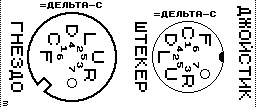
<style>
.page{position:relative;width:256px;height:107px;background:#ffffff}
.page>*{position:absolute;margin:0}
.t1{font:16px "ZX 6x8";color:#000000}
.t2{font:32px "zxSpectrumStrict";color:#000000}
</style>
<div class="page">
<p class="t1" style="left:237px;top:6px;width:16px;height:94px;rotate:90deg">ДЖОЙСТИК</p>
<p class="t1" style="left:9px;top:22px;width:14px;height:70px;rotate:90deg">ГНЕЗДО</p>
<p class="t2" style="left:66px;top:25px;width:12px;height:12px;rotate:90deg">D</p>
<p class="t1" style="left:135px;top:22px;width:12px;height:70px;rotate:90deg">ШТЕКЕР</p>
<p class="t2" style="left:182px;top:27px;width:12px;height:12px;rotate:90deg">C</p>
<p class="t2" style="left:48px;top:33px;width:12px;height:12px;rotate:90deg">C</p>
<p class="t2" style="left:84px;top:33px;width:12px;height:12px;rotate:90deg">L</p>
<p class="t2" style="left:165px;top:34px;width:12px;height:12px;rotate:90deg">D</p>
<p class="t2" style="left:199px;top:34px;width:12px;height:12px;rotate:90deg">F</p>
<p class="t2" style="left:40px;top:51px;width:12px;height:12px;rotate:90deg">F</p>
<p class="t2" style="left:92px;top:51px;width:12px;height:12px;rotate:90deg">U</p>
<p class="t2" style="left:158px;top:51px;width:12px;height:12px;rotate:90deg">L</p>
<p class="t2" style="left:84px;top:69px;width:12px;height:12px;rotate:90deg">R</p>
<p class="t2" style="left:165px;top:68px;width:12px;height:12px;rotate:90deg">U</p>
<p class="t2" style="left:182px;top:75px;width:12px;height:12px;rotate:90deg">R</p>
</div>
